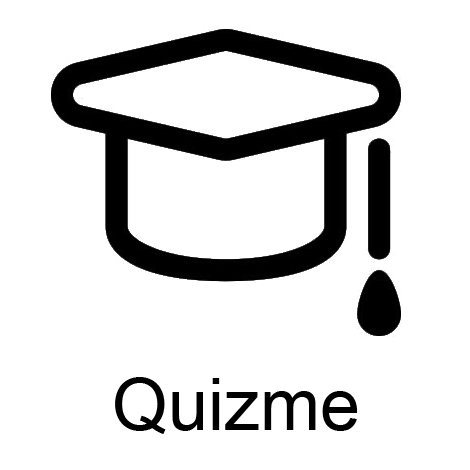
<style>
.page{position:relative;width:470px;height:470px;background:#ffffff}
.page>*{position:absolute;margin:0}
.t1{font:72px "ArialMT";color:#000000}
</style>
<div class="page">
<p class="t1" style="left:115px;top:377px;width:243px;height:57px">Quizme</p>
</div>
